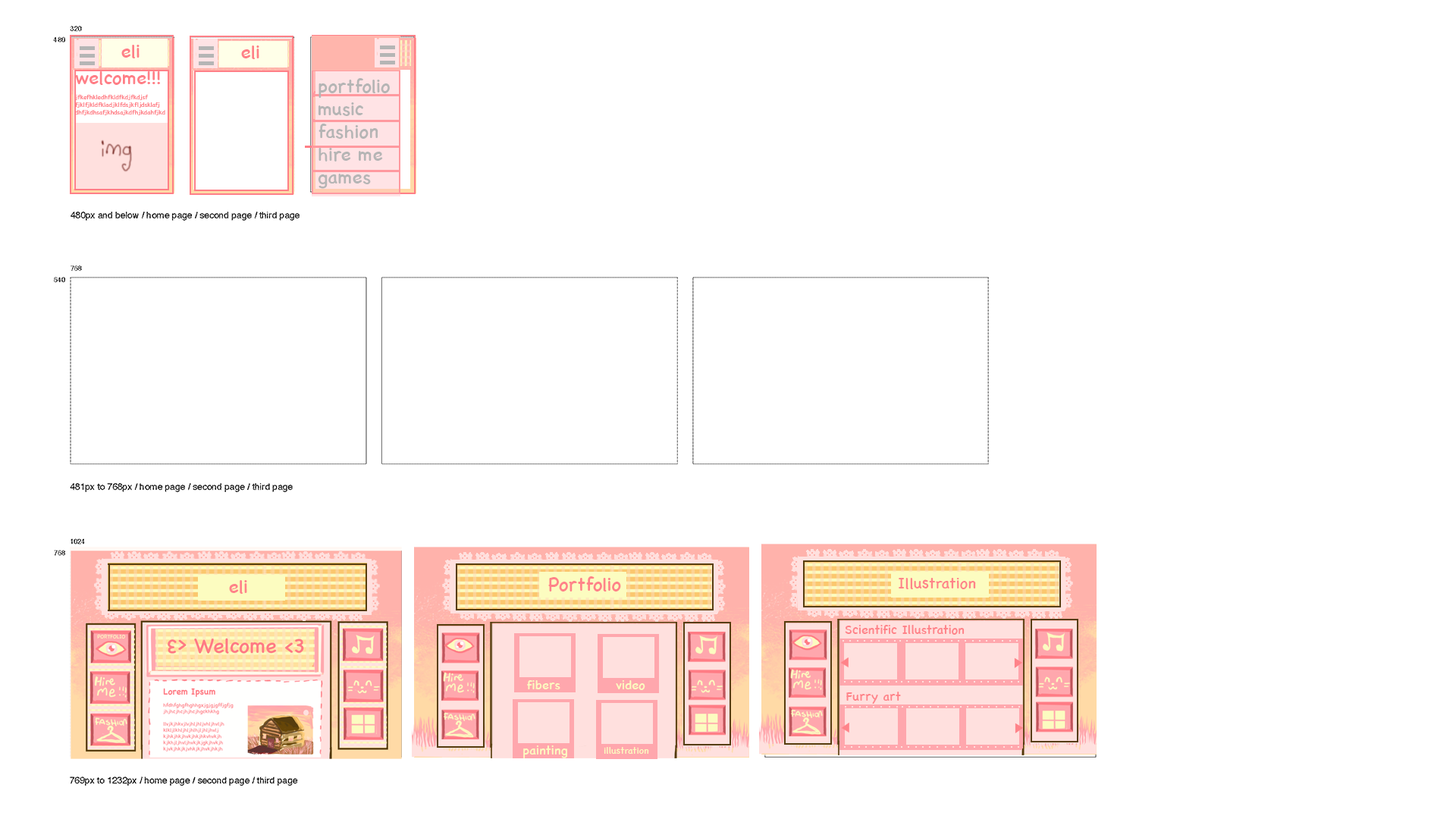
<style>
.page{position:relative;width:1456px;height:819px;background:#ffffff}
.page>*{position:absolute;margin:0}
.t1{font:19px "ChalkboardSE-Regular";color:#ff7f87}
.t2{font:6.3px "ChalkboardSE-Regular";color:#ff7f87}
.t3{font:19px "ChalkboardSE-Regular";color:#b5b5b5}
.t4{font:19px "ChalkboardSE-Regular";color:#ff8389}
.t5{font:15.8px "ChalkboardSE-Regular";color:#ff8389}
.t6{font:12.6px "ChalkboardSE-Regular";color:#ff8389}
.t7{font:12.6px "ChalkboardSE-Regular";color:#fcfcc0}
.t8{font:9.5px "ChalkboardSE-Regular";color:#fcfcc0}
</style>
<div class="page">
<p class="t1" style="left:121px;top:45px;width:19px;height:13px">eli</p>
<p class="t1" style="left:241px;top:45px;width:18px;height:14px">eli</p>
<p class="t2" style="left:74px;top:71px;width:91px;height:44px"><span class="t1">welcome!!!</span><br><br>jfkefhkledhfkldfkdjfkdjsf<br>fjklfjkldfkladjklfdsjkfljdsklafj<br>dhfjkdhsafjkhdsajkdfhjkdahfjkd</p>
<p class="t3" style="left:318px;top:78px;width:72px;height:111px">portfolio<br>music<br>fashion<br>hire me<br>games</p>
<p class="t4" style="left:229px;top:580px;width:18px;height:14px">eli</p>
<p class="t4" style="left:548px;top:576px;width:73px;height:15px">Portfolio</p>
<p class="t5" style="left:899px;top:578px;width:77px;height:11px">Illustration</p>
<p class="t6" style="left:845px;top:625px;width:120px;height:10px">Scientific Illustration</p>
<p class="t7" style="left:527px;top:680px;width:33px;height:9px">fibers</p>
<p class="t7" style="left:616px;top:680px;width:29px;height:10px">video</p>
<p class="t6" style="left:846px;top:692px;width:55px;height:12px">Furry art</p>
<p class="t7" style="left:523px;top:745px;width:44px;height:13px">painting</p>
<p class="t8" style="left:604px;top:747px;width:45px;height:7px">illustration</p>
</div>
